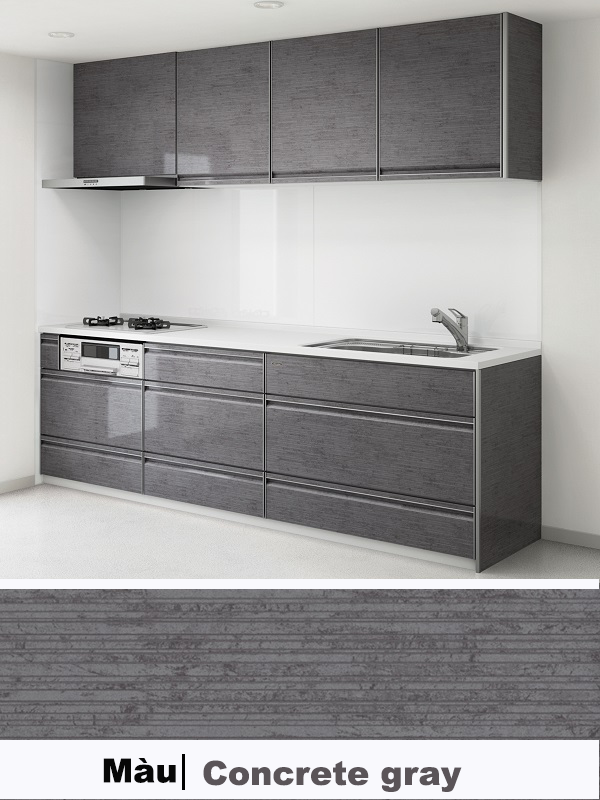
<style>
.page{position:relative;width:600px;height:800px}
.page>*{position:absolute;margin:0}
.t1{font:33.3px "Arial-Black";color:#070707}
.t2{font:33.3px "Arial-Black";color:#595458}
</style>
<div class="page">
<p class="t1" style="left:103px;top:758px;width:73px;height:25px">Màu</p>
<p class="t2" style="left:203px;top:760px;width:259px;height:32px">Concrete gray</p>
</div>
